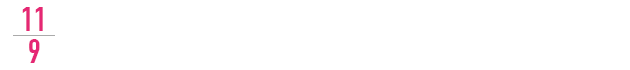
<style>
.page{position:relative;width:630px;height:70px;background:#ffffff}
.page>*{position:absolute;margin:0}
.t1{font:34px/32px "DINCondensed-Bold";color:#e52774;text-transform:uppercase}
</style>
<div class="page">
<p class="t1" style="left:22px;top:7px;width:21px;height:56px;text-align:center">11<br>9</p>
</div>
